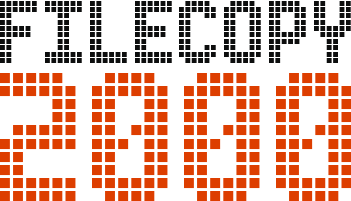
<style>
.page{position:relative;width:351px;height:201px;background:#ffffff}
.page>*{position:absolute;margin:0}
.t1{font:80px "AdvancedLEDBoard-7";color:#0d0e0e}
.t2{font:164px "AdvancedLEDBoard-7";color:#dd3e00}
</style>
<div class="page">
<p class="t1" style="left:0px;top:1px;width:351px;height:62px">FILECOPY</p>
<p class="t2" style="left:0px;top:73px;width:352px;height:128px">2000</p>
</div>
